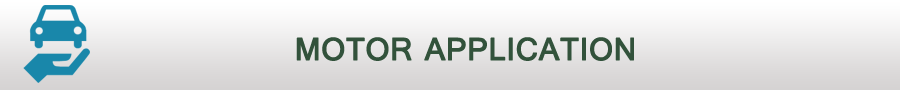
<style>
.page{position:relative;width:900px;height:90px}
.page>*{position:absolute;margin:0}
.t1{font:33.9px "Raavi";color:#32523b;text-transform:uppercase;font-weight:bold}
</style>
<div class="page">
<p class="t1" style="left:296px;top:37px;width:338px;height:24px">Motor Application</p>
</div>
